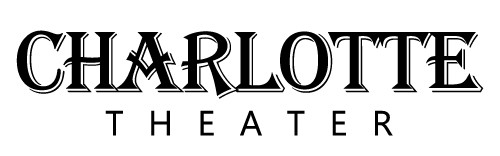
<style>
.page{position:relative;width:500px;height:156px;background:#ffffff}
.page>*{position:absolute;margin:0}
.t1{font:90px "Algerian";letter-spacing:-0.045em;color:#000000}
.t2{font:35px "Gadugi";letter-spacing:0.7em;color:#000000}
</style>
<div class="page">
<p class="t1" style="left:16px;top:30px;width:468px;height:69px">CHARLOTTE</p>
<p class="t2" style="left:105px;top:110px;width:288px;height:26px">THEATER</p>
</div>
